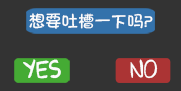
<style>
.page{position:relative;width:181px;height:91px;background:#333333}
.page>*{position:absolute;margin:0}
.t1{font:16.1px "STHeitiSC-Light";color:#fbfbfb}
.t2{font:16.1px "ZhunYuan";color:#fbfbfb}
.t3{font:22.4px "GoBoom!";color:#fbfbfb}
</style>
<div class="page">
<p class="t1" style="left:29px;top:13px;width:124px;height:16px">想要吐槽一下吗<span class="t2">？</span></p>
<p class="t3" style="left:23px;top:59px;width:38px;height:20px">YES</p>
<p class="t3" style="left:130px;top:59px;width:28px;height:20px">NO</p>
</div>
